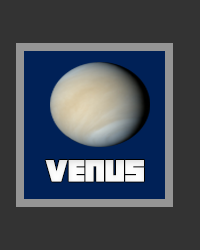
<style>
.page{position:relative;width:200px;height:250px;background:#333333}
.page>*{position:absolute;margin:0}
.t1{font:31.4px "RobotRadicals";color:#ffffff}
</style>
<div class="page">
<p class="t1" style="left:45px;top:160px;width:99px;height:22px">venus</p>
</div>
